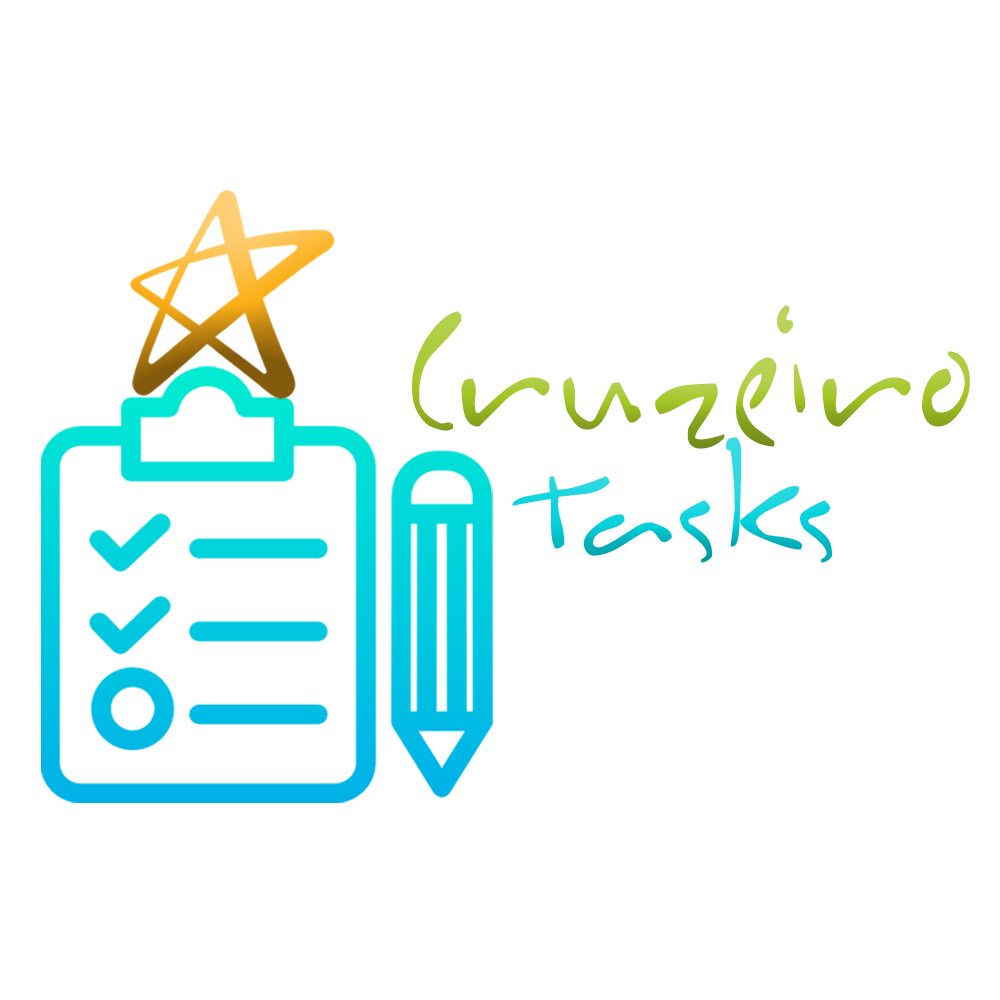
<style>
.page{position:relative;width:1000px;height:1000px;background:#ffffff}
.page>*{position:absolute;margin:0}
.t1{font:244.2px "Inkburrow";font-weight:bold;scale:0.58 1}
.t2{font:151.6px "Inkburrow";font-weight:bold}
</style>
<div class="page">
<p class="t1" style="left:412px;top:305px;width:558px;height:144px">Cruzeiro</p>
<p class="t2" style="left:512px;top:437px;width:321px;height:126px">Tasks</p>
</div>
